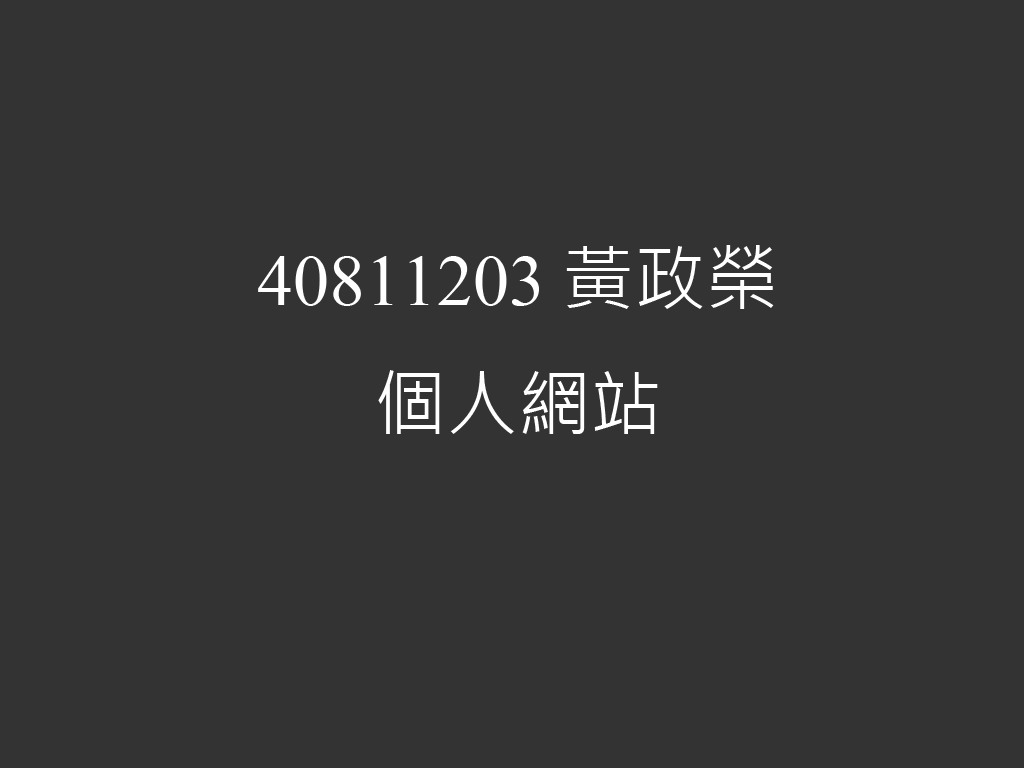
<style>
.page{position:relative;width:1024px;height:768px;background:#333333}
.page>*{position:absolute;margin:0}
.t1{font:72px "TimesNewRomanPSMT";color:#ffffff}
.t2{font:72px "MicrosoftJhengHeiRegular";color:#ffffff}
</style>
<div class="page">
<p class="t1" style="left:258px;top:245px;width:516px;height:189px;text-align:center">40811203 <span class="t2">黃政榮<br>個人網站</span></p>
</div>
